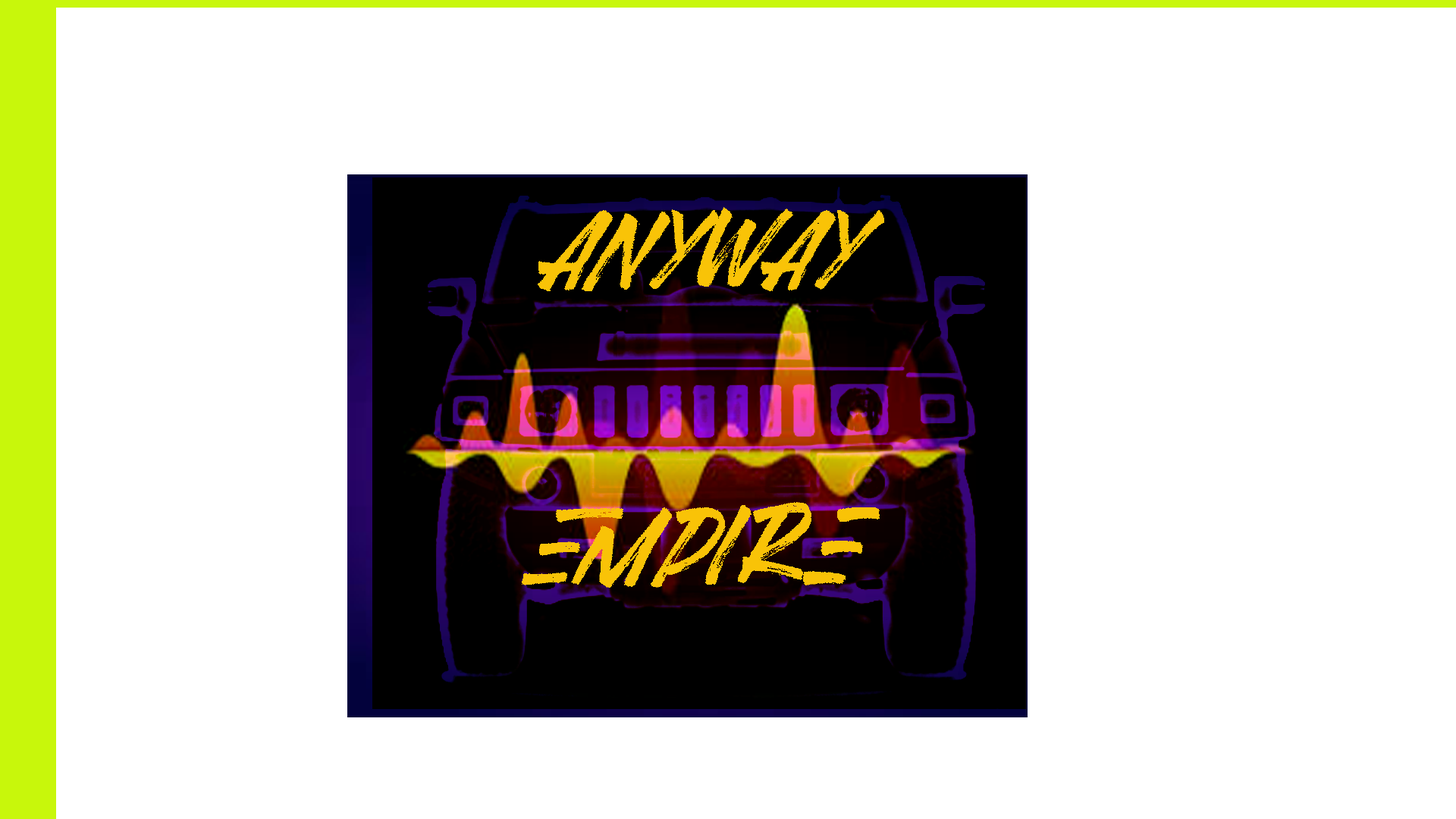
<style>
.page{position:relative;width:1456px;height:819px;background:#ffffff}
.page>*{position:absolute;margin:0}
.t1{font:113.7px "BlackRusher";letter-spacing:-0.025em;color:#f9c307}
</style>
<div class="page">
<p class="t1" style="left:538px;top:207px;width:347px;height:85px">ANYWAY</p>
<p class="t1" style="left:522px;top:502px;width:358px;height:86px">EMPIRE</p>
</div>
